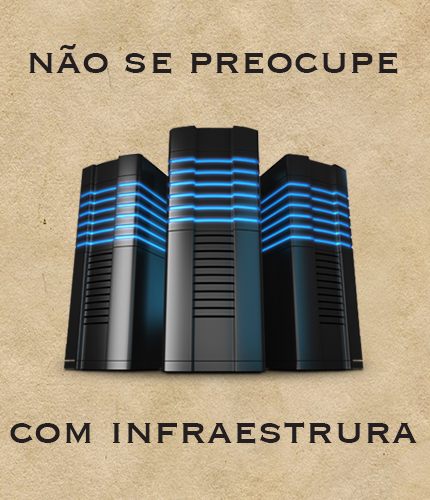
<style>
.page{position:relative;width:430px;height:500px}
.page>*{position:absolute;margin:0}
.t1{font:45.8px "Copperplate";color:#231f20}
</style>
<div class="page">
<p class="t1" style="left:29px;top:44px;width:369px;height:30px">não se preocupe</p>
<p class="t1" style="left:10px;top:422px;width:407px;height:22px">com infraestrura</p>
</div>
